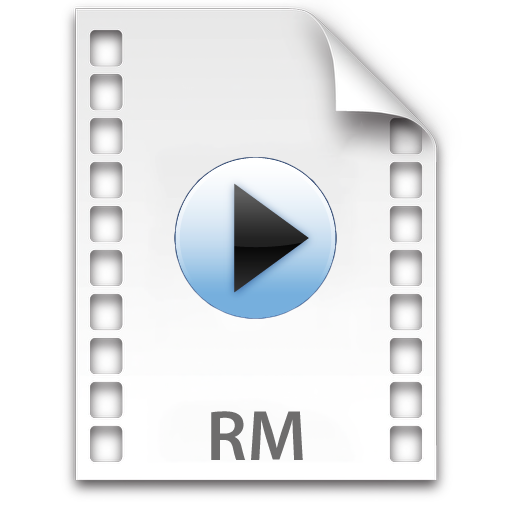
<style>
.page{position:relative;width:512px;height:512px;background:#ffffff}
.page>*{position:absolute;margin:0}
.t1{font:72px "MyriadPro-Semibold";color:#6e6d6d}
</style>
<div class="page">
<p class="t1" style="left:211px;top:411px;width:92px;height:49px">RM</p>
</div>
